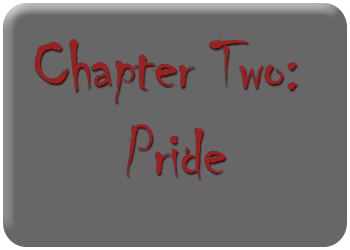
<style>
.page{position:relative;width:350px;height:250px;background:#676767}
.page>*{position:absolute;margin:0}
.t1{font:72.2px "Chiller-Regular";letter-spacing:-0.025em;color:#992122}
</style>
<div class="page">
<p class="t1" style="left:34px;top:34px;width:263px;height:145px;text-align:center">Chapter Two: <br>Pride</p>
</div>
